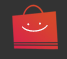
<style>
.page{position:relative;width:67px;height:59px;background:#333333}
.page>*{position:absolute;margin:0}
.t1{font:24.8px "Roboto-Thin";letter-spacing:-0.008em;color:#fefefe}
</style>
<div class="page">
<p class="t1" style="left:22px;top:22px;width:26px;height:10px;rotate:87deg">:)</p>
</div>
